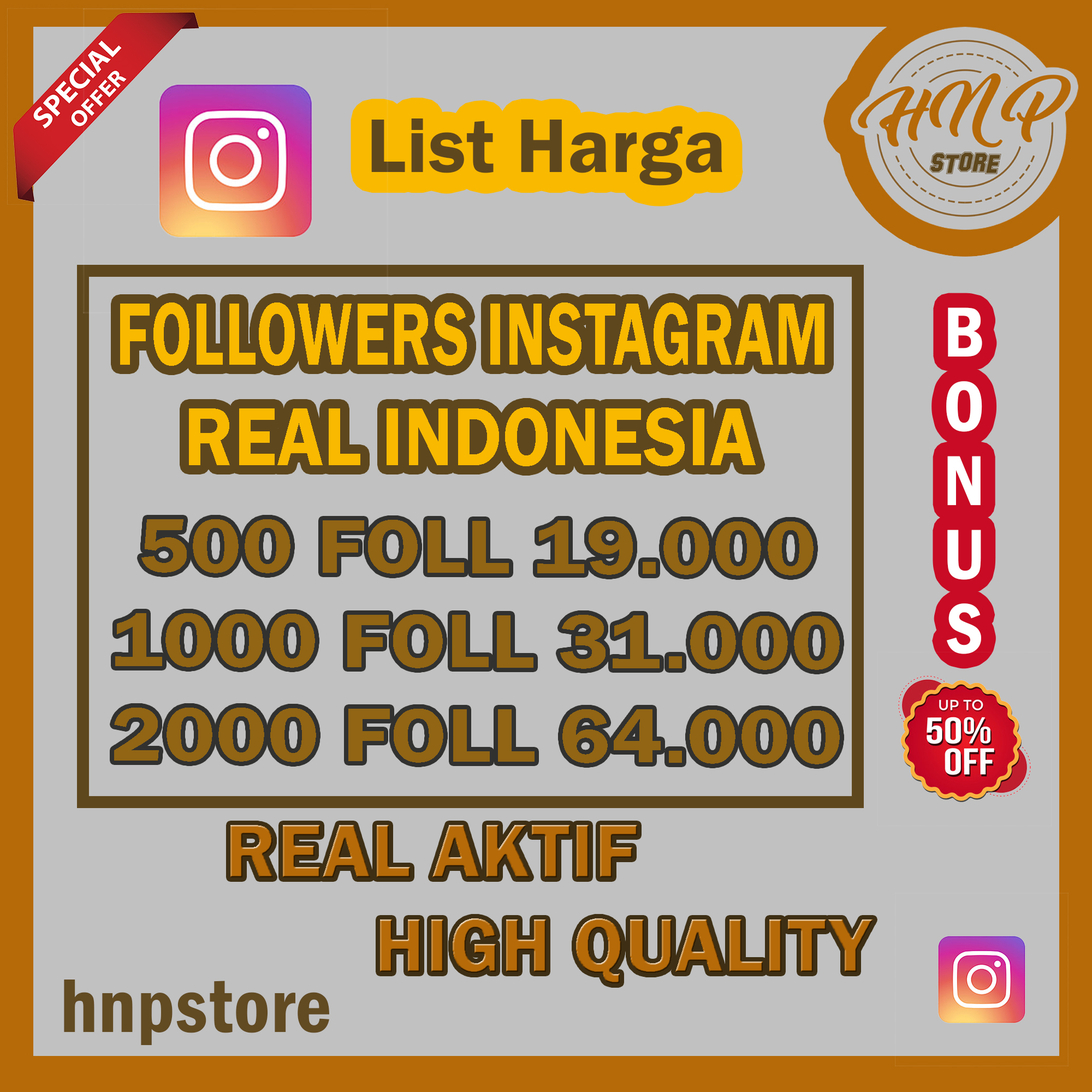
<style>
.page{position:relative;width:1092px;height:1092px;background:#c1c1c1}
.page>*{position:absolute;margin:0}
.t1{font:91.9px "FranklinGothic-Demi";letter-spacing:0.01em;color:#f9b900;scale:0.69 1}
.t2{font:85.2px "FranklinGothic-Demi";letter-spacing:0.01em;color:#f9b900;scale:0.88 1}
.t3{font:78.6px "FranklinGothic-Demi";letter-spacing:0.01em;color:#916514;scale:1.11 1}
.t4{font:78.6px "FranklinGothic-Demi";letter-spacing:0.01em;color:#b66a08}
</style>
<div class="page">
<p class="t1" style="left:120px;top:302px;width:704px;height:64px">FOLLOWERS INSTAGRAM</p>
<p class="t2" style="left:189px;top:407px;width:567px;height:59px">REAL INDONESIA</p>
<p class="t3" style="left:114px;top:519px;width:726px;height:245px;text-align:center">500 FOLL 19.000<br>1000 FOLL 31.000<br>2000 FOLL 64.000</p>
<p class="t4" style="left:230px;top:825px;width:643px;height:158px;text-align:center">REAL AKTIF<br>                   HIGH QUALITY</p>
</div>
